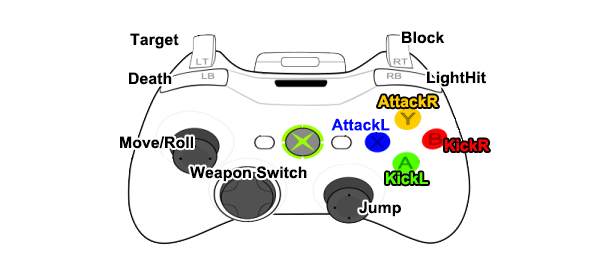
<style>
.page{position:relative;width:600px;height:278px;background:#ffffff}
.page>*{position:absolute;margin:0}
.t1{font:15.9px "Arial-BoldMT";color:#000000}
.t2{font:15.9px "Arial-BoldMT";color:#ffcc00}
.t3{font:15.9px "Arial-BoldMT";color:#0006ff}
.t4{font:15.9px "Arial-BoldMT";color:#ff0000}
.t5{font:15.9px "Arial-BoldMT";color:#54ff00}
</style>
<div class="page">
<p class="t1" style="left:130px;top:33px;width:49px;height:16px">Target</p>
<p class="t1" style="left:402px;top:31px;width:43px;height:13px">Block</p>
<p class="t1" style="left:129px;top:72px;width:43px;height:13px">Death</p>
<p class="t1" style="left:427px;top:71px;width:59px;height:16px">LightHit</p>
<p class="t2" style="left:378px;top:95px;width:60px;height:13px">AttackR</p>
<p class="t3" style="left:331px;top:118px;width:59px;height:13px">AttackL</p>
<p class="t1" style="left:120px;top:136px;width:73px;height:13px">Move/Roll</p>
<p class="t4" style="left:445px;top:139px;width:44px;height:13px">KickR</p>
<p class="t1" style="left:190px;top:166px;width:117px;height:16px">Weapon Switch</p>
<p class="t5" style="left:386px;top:172px;width:42px;height:13px">KickL</p>
<p class="t1" style="left:359px;top:201px;width:42px;height:16px">Jump</p>
</div>
